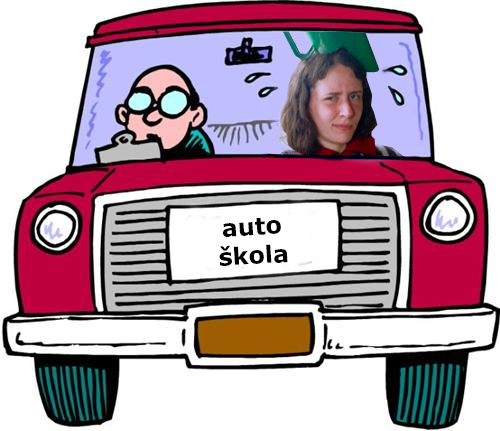
<style>
.page{position:relative;width:500px;height:431px;background:#ffffff}
.page>*{position:absolute;margin:0}
.t1{font:23.9px "Verdana-Bold";color:#000000}
</style>
<div class="page">
<p class="t1" style="left:219px;top:217px;width:69px;height:49px;text-align:center;rotate:-4deg">auto<br>škola</p>
</div>
